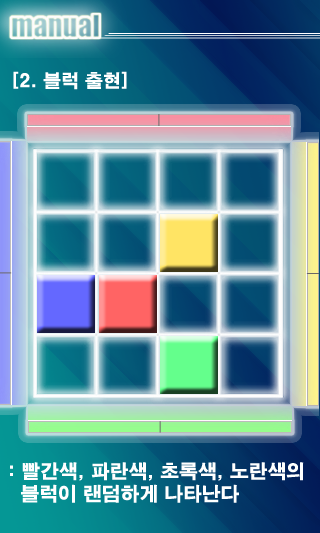
<style>
.page{position:relative;width:320px;height:533px}
.page>*{position:absolute;margin:0}
.t1{font:17.9px "H2gtrE";color:#ffffff}
.t2{font:18.8px "H2gtrE";color:#ffffff}
</style>
<div class="page">
<p class="t1" style="left:13px;top:71px;width:114px;height:19px">[2. 블럭 출현]</p>
<p class="t2" style="left:10px;top:462px;width:294px;height:41px">: 빨간색, 파란색, 초록색, 노란색의<br>  블럭이 랜덤하게 나타난다</p>
</div>
